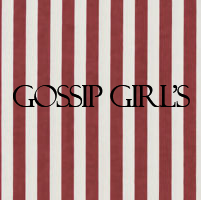
<style>
.page{position:relative;width:201px;height:200px}
.page>*{position:absolute;margin:0}
.t1{font:30px "FelixTitlingMT";letter-spacing:-0.05em;color:#000000}
</style>
<div class="page">
<p class="t1" style="left:13px;top:85px;width:177px;height:22px">GOSSIP GIRL’S</p>
</div>
